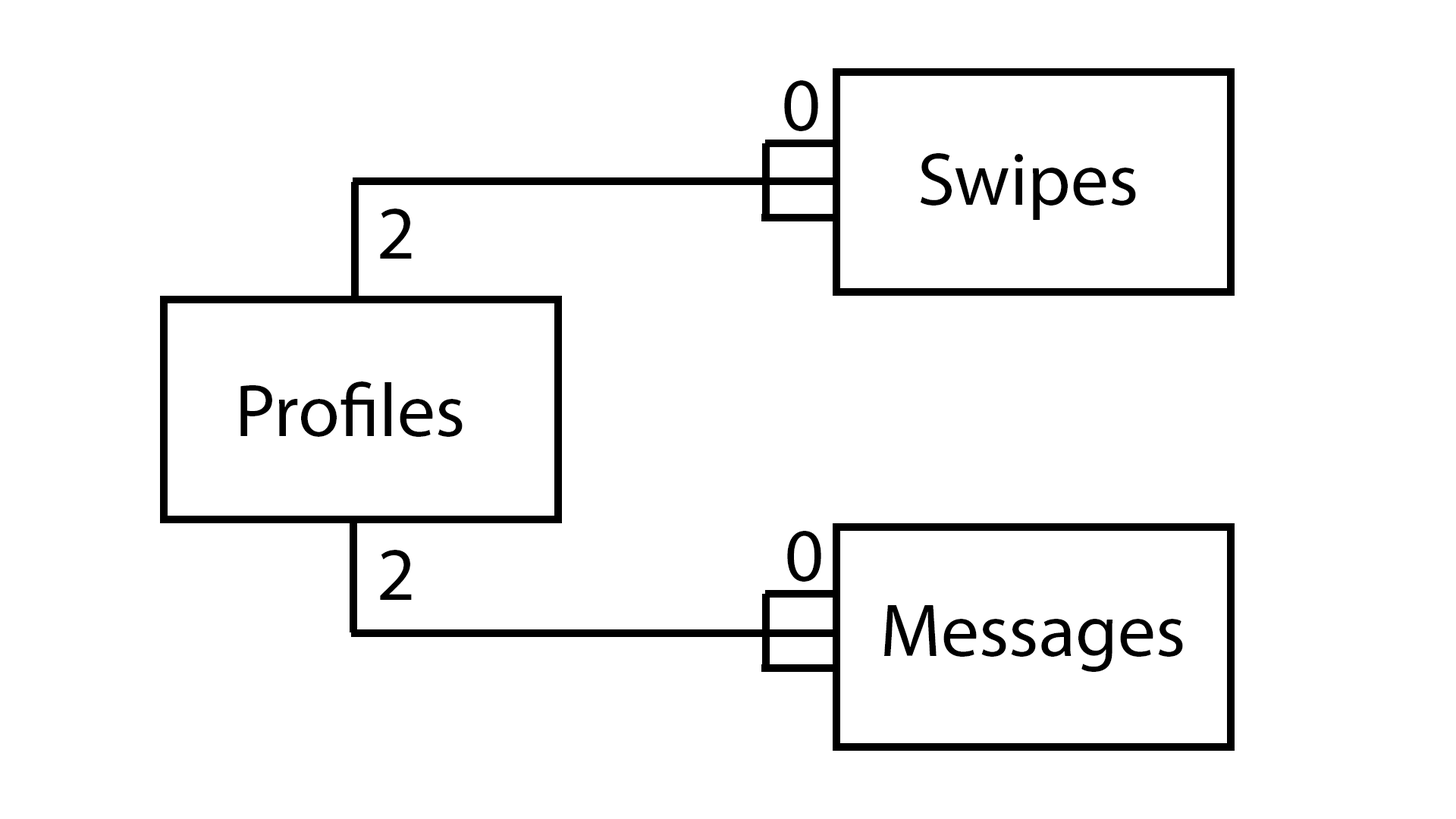
<style>
.page{position:relative;width:1456px;height:819px;background:#ffffff}
.page>*{position:absolute;margin:0}
.t1{font:75.8px "MyriadPro-Regular";color:#000000}
</style>
<div class="page">
<p class="t1" style="left:784px;top:80px;width:34px;height:51px">0</p>
<p class="t1" style="left:920px;top:153px;width:216px;height:67px">Swipes</p>
<p class="t1" style="left:380px;top:209px;width:32px;height:50px">2</p>
<p class="t1" style="left:240px;top:381px;width:223px;height:56px">Profiles</p>
<p class="t1" style="left:787px;top:531px;width:34px;height:51px">0</p>
<p class="t1" style="left:380px;top:550px;width:32px;height:50px">2</p>
<p class="t1" style="left:884px;top:605px;width:299px;height:67px">Messages</p>
</div>
